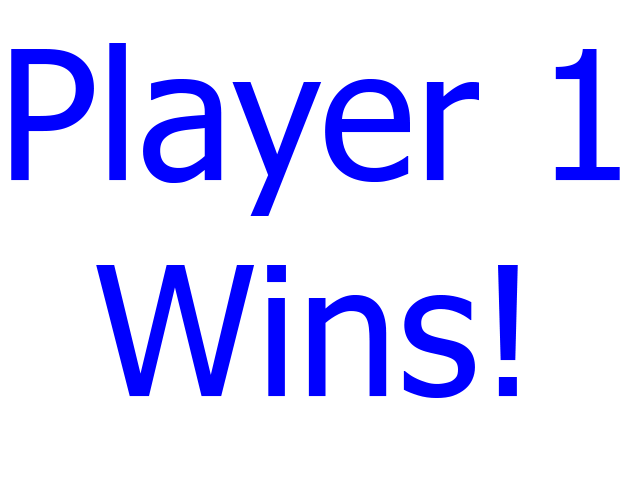
<style>
.page{position:relative;width:640px;height:480px;background:#ffffff}
.page>*{position:absolute;margin:0}
.t1{font:180px "Tahoma";color:#0000ff}
</style>
<div class="page">
<p class="t1" style="left:11px;top:43px;width:609px;height:355px;text-align:center">Player 1<br>Wins!</p>
</div>
